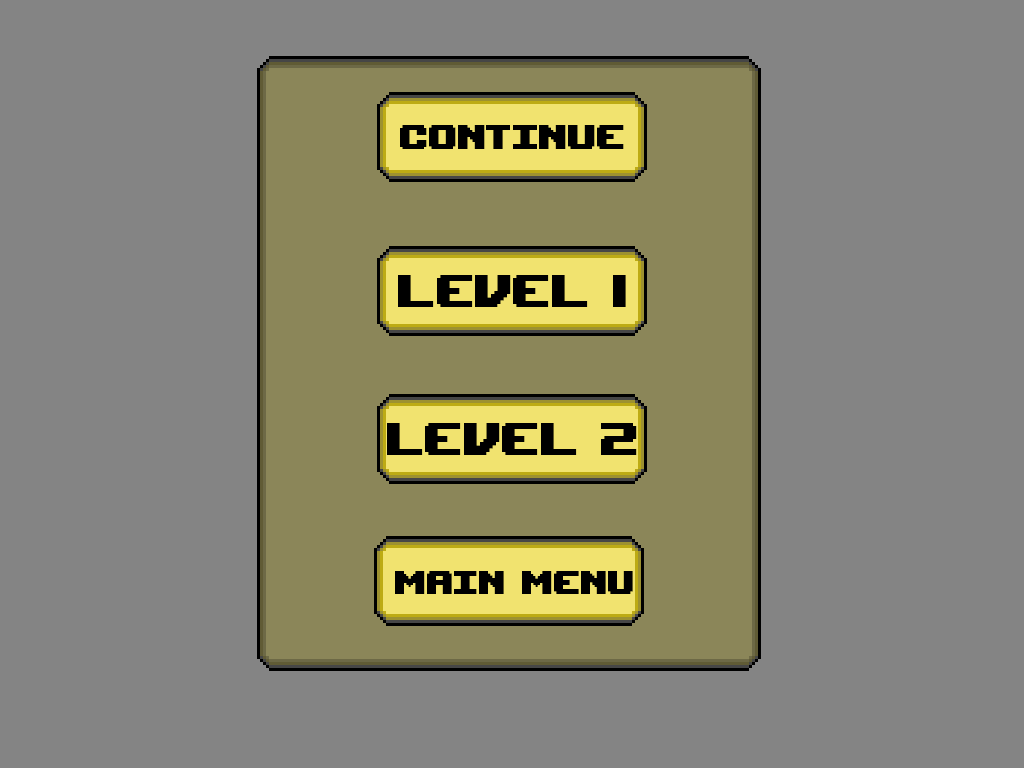
<style>
.page{position:relative;width:1024px;height:768px;background:#848484}
.page>*{position:absolute;margin:0}
.t1{font:48px "UpheavalTT-BRK-";color:#000000}
.t2{font:64px "UpheavalTT-BRK-";color:#000000}
.t3{font:45.3px "UpheavalTT-BRK-";color:#000000}
</style>
<div class="page">
<p class="t1" style="left:400px;top:125px;width:224px;height:24px">CONTINUE</p>
<p class="t2" style="left:398px;top:275px;width:228px;height:32px">LEVEL 1</p>
<p class="t2" style="left:387px;top:423px;width:250px;height:32px">LEVEL 2</p>
<p class="t3" style="left:395px;top:571px;width:238px;height:23px">MAIN MENU</p>
</div>
